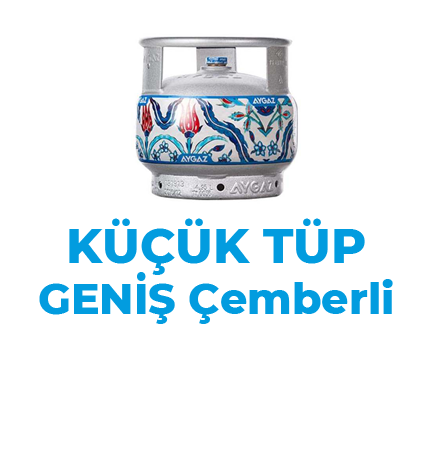
<style>
.page{position:relative;width:432px;height:452px;background:#ffffff}
.page>*{position:absolute;margin:0}
.t1{font:42.7px "Montserrat-ExtraBold";color:#029cdf}
.t2{font:48px "Montserrat-ExtraBold";color:#029cdf}
</style>
<div class="page">
<p class="t1" style="left:39px;top:218px;width:354px;height:106px;text-align:center"><span class="t2">KÜÇÜK TÜP<br></span>GENİŞ Çemberli</p>
</div>
